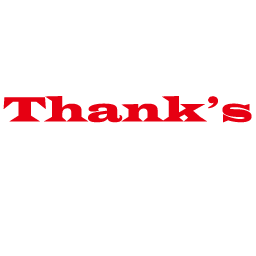
<style>
.page{position:relative;width:256px;height:256px;background:#ffffff}
.page>*{position:absolute;margin:0}
.t1{font:36px "LatinWide";color:#e60012}
</style>
<div class="page">
<p class="t1" style="left:3px;top:96px;width:249px;height:27px">Thank’s</p>
</div>
